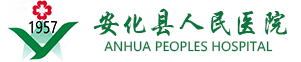
<style>
.page{position:relative;width:301px;height:62px;background:#ffffff}
.page>*{position:absolute;margin:0}
.t1{font:22.1px "STXingkai";color:#09743b;scale:0.91 1}
.t2{font:12.5px "MicrosoftYaHei";color:#09743b}
</style>
<div class="page">
<p class="t1" style="left:93px;top:8px;width:194px;height:28px">安化县人民医院</p>
<p class="t2" style="left:104px;top:41px;width:169px;height:11px">ANHUA PEOPLES HOSPITAL</p>
</div>
